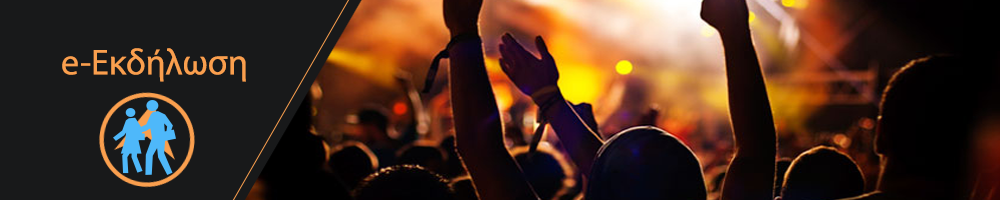
<style>
.page{position:relative;width:1000px;height:200px;background:#18191a}
.page>*{position:absolute;margin:0}
.t1{font:36px "MyriadPro-Regular";color:#fa9f4e}
</style>
<div class="page">
<p class="t1" style="left:62px;top:48px;width:184px;height:34px">e-Εκδήλωση</p>
</div>
